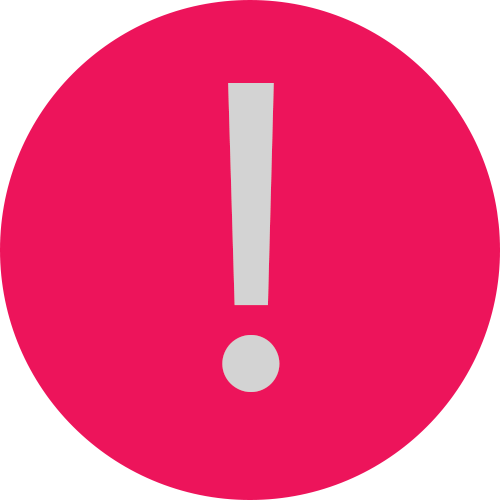
<style>
.page{position:relative;width:500px;height:500px;background:#ed145b}
.page>*{position:absolute;margin:0}
.t1{font:441.7px "Consolas";color:#d3d3d3}
</style>
<div class="page">
<p class="t1" style="left:222px;top:83px;width:58px;height:309px">!</p>
</div>
